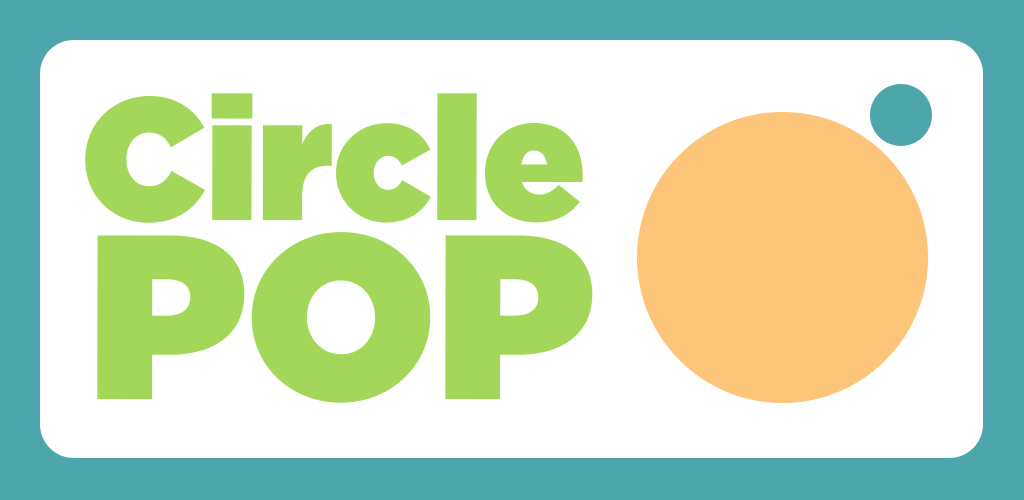
<style>
.page{position:relative;width:1024px;height:500px;background:#ffffff}
.page>*{position:absolute;margin:0}
.t1{font:173.6px "Gotham-Ultra";color:#a3d759}
.t2{font:233.7px "Gotham-Ultra";color:#a3d759}
</style>
<div class="page">
<p class="t1" style="left:85px;top:93px;width:498px;height:130px">Circle</p>
<p class="t2" style="left:97px;top:232px;width:496px;height:171px">POP</p>
</div>
